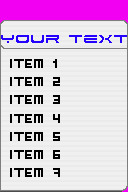
<style>
.page{position:relative;width:128px;height:192px;background:#f0f0f0}
.page>*{position:absolute;margin:0}
.t1{font:13.9px "Dodger";color:#2400ff}
.t2{font:15.2px "Bit3";color:#000000}
</style>
<div class="page">
<p class="t1" style="left:1px;top:35px;width:126px;height:8px">your text</p>
<p class="t2" style="left:10px;top:59px;width:50px;height:118px">item 1<br>item 2<br>item 3<br>item 4<br>item 5<br>item 6<br>item 7</p>
</div>
